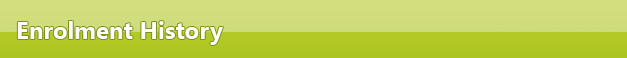
<style>
.page{position:relative;width:627px;height:58px}
.page>*{position:absolute;margin:0}
.t1{font:24px "SegoeUI-Bold";color:#fefefe}
</style>
<div class="page">
<p class="t1" style="left:17px;top:21px;width:206px;height:24px">Enrolment History</p>
</div>
